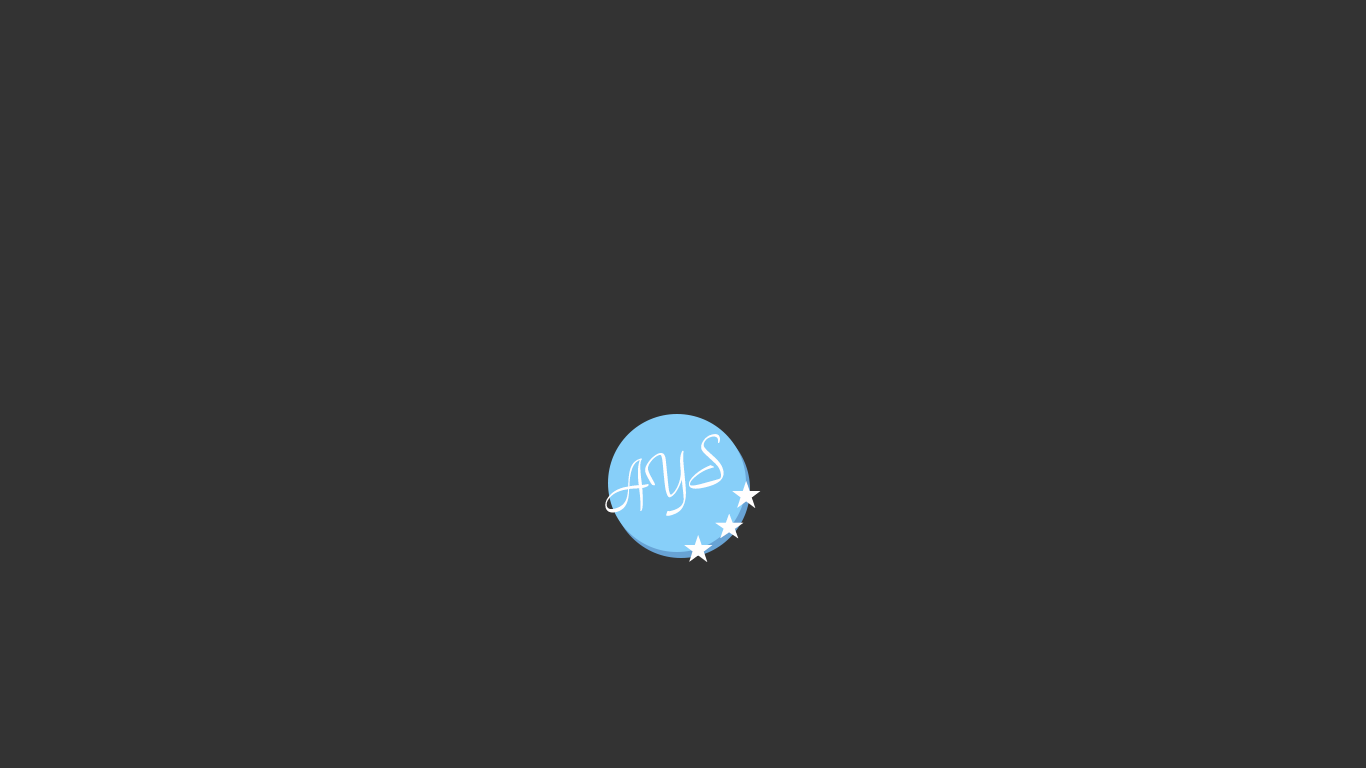
<style>
.page{position:relative;width:1366px;height:768px;background:#333333}
.page>*{position:absolute;margin:0}
.t1{font:66.5px "ParkAvenue-BT";color:#fffefe;scale:0.71 1}
.t2{font:72px "ParkAvenue-BT";color:#fffefe;scale:0.71 1}
.t3{font:34.6px "Gulim";color:#fffefe}
.t4{font:31.7px "Gulim";color:#fffefe;scale:1.09 1}
</style>
<div class="page">
<p class="t1" style="left:605px;top:434px;width:119px;height:82px;rotate:-15deg">AY<span class="t2">S</span></p>
<p class="t3" style="left:732px;top:481px;width:29px;height:27px">★</p>
<p class="t4" style="left:715px;top:514px;width:29px;height:25px">★</p>
<p class="t3" style="left:684px;top:535px;width:29px;height:27px">★</p>
</div>
